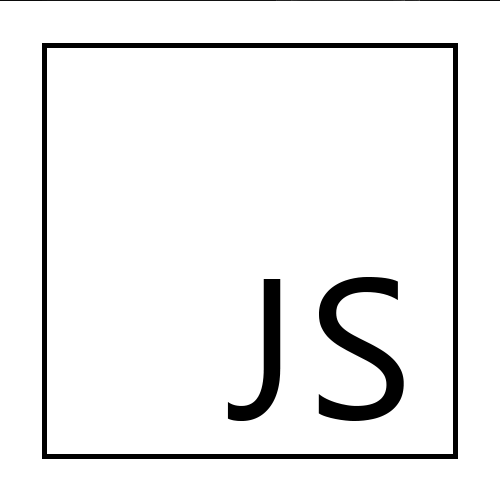
<style>
.page{position:relative;width:500px;height:500px;background:#ffffff}
.page>*{position:absolute;margin:0}
.t1{font:200px "SegoeUI";letter-spacing:0.05em;color:#000000}
</style>
<div class="page">
<p class="t1" style="left:227px;top:276px;width:177px;height:144px">JS</p>
</div>
